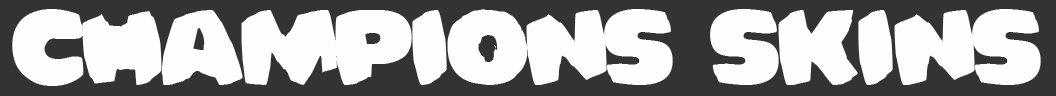
<style>
.page{position:relative;width:1056px;height:96px;background:#fefefe}
.page>*{position:absolute;margin:0}
.t1{font:100px "Bomberman";color:#fefefe}
</style>
<div class="page">
<p class="t1" style="left:12px;top:9px;width:1029px;height:77px">Champions Skins</p>
</div>
